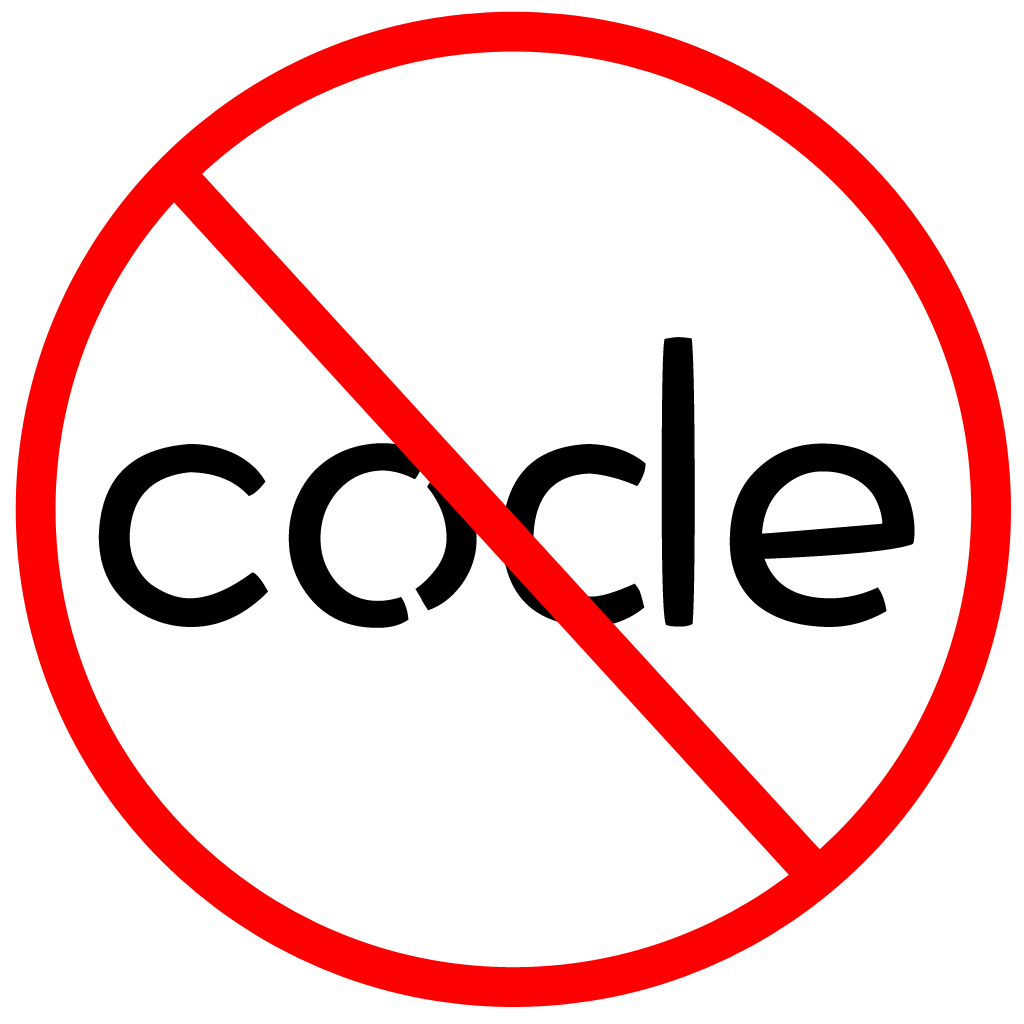
<style>
.page{position:relative;width:1024px;height:1024px;background:#ffffff}
.page>*{position:absolute;margin:0}
.t1{font:431px "DFWaWaSC-W5";color:#000000}
</style>
<div class="page">
<p class="t1" style="left:98px;top:337px;width:817px;height:291px">code</p>
</div>
